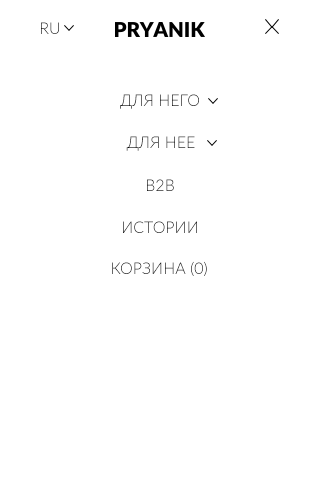
<style>
.page{position:relative;width:320px;height:480px;background:#ffffff}
.page>*{position:absolute;margin:0}
.t1{font:16px "Lato-Light";text-transform:uppercase}
.t2{font:16px "Lato-Light";color:#000000;text-transform:uppercase}
</style>
<div class="page">
<p class="t1" style="left:41px;top:22px;width:18px;height:12px">ru</p>
<p class="t1" style="left:120px;top:94px;width:79px;height:15px">Для него</p>
<p class="t2" style="left:126px;top:136px;width:69px;height:15px">Для нее</p>
<p class="t1" style="left:147px;top:179px;width:27px;height:12px">B2b</p>
<p class="t1" style="left:123px;top:221px;width:74px;height:12px">Истории</p>
<p class="t1" style="left:112px;top:261px;width:95px;height:15px">Корзина (0)</p>
</div>
